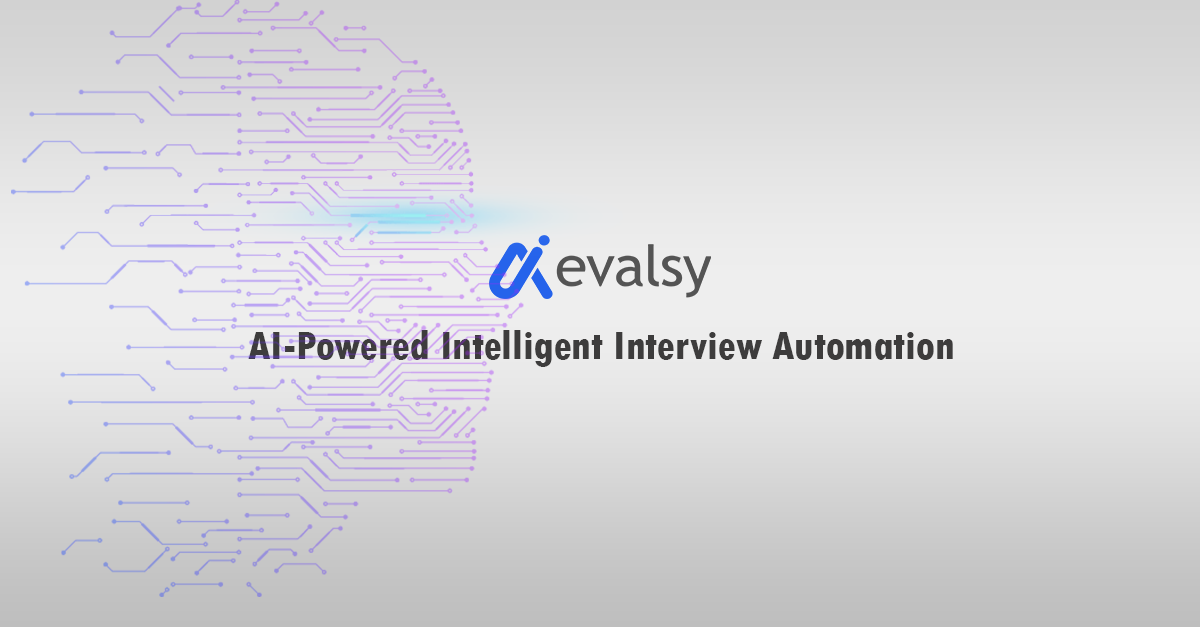
<style>
.page{position:relative;width:1200px;height:627px}
.page>*{position:absolute;margin:0}
.t1{font:41.7px "TwCenMT-CondensedExtraBold";color:#3d3c3c}
</style>
<div class="page">
<p class="t1" style="left:248px;top:330px;width:705px;height:37px">AI-Powered Intelligent Interview Automation</p>
</div>
